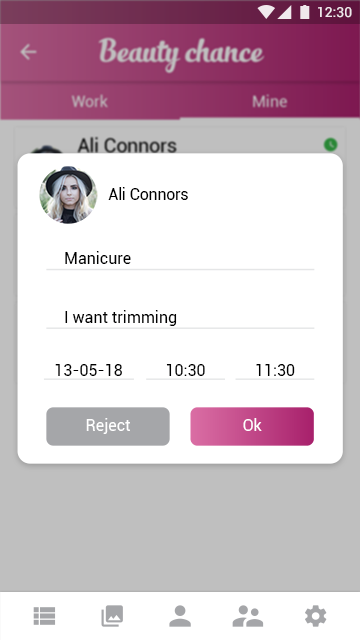
<style>
.page{position:relative;width:360px;height:640px;background:#ffffff}
.page>*{position:absolute;margin:0}
.t1{font:14px "Roboto-Medium";color:#ffffff}
.t2{font:16px "Roboto-Regular";letter-spacing:-0.005em;color:#000000}
.t3{font:16px "Roboto-Regular";color:#000000}
.t4{font:16px "Roboto-Regular";color:#ffffff}
</style>
<div class="page">
<p class="t1" style="left:318px;top:7px;width:34px;height:11px">12:30</p>
<p class="t2" style="left:108px;top:187px;width:80px;height:13px">Ali Connors</p>
<p class="t3" style="left:65px;top:251px;width:66px;height:13px">Manicure</p>
<p class="t3" style="left:65px;top:310px;width:112px;height:16px">I want trimming</p>
<p class="t3" style="left:55px;top:364px;width:67px;height:12px">13-05-18</p>
<p class="t3" style="left:166px;top:364px;width:39px;height:12px">10:30</p>
<p class="t3" style="left:256px;top:364px;width:39px;height:12px">11:30</p>
<p class="t4" style="left:86px;top:418px;width:44px;height:16px">Reject</p>
<p class="t4" style="left:243px;top:418px;width:19px;height:13px">Ok</p>
</div>
